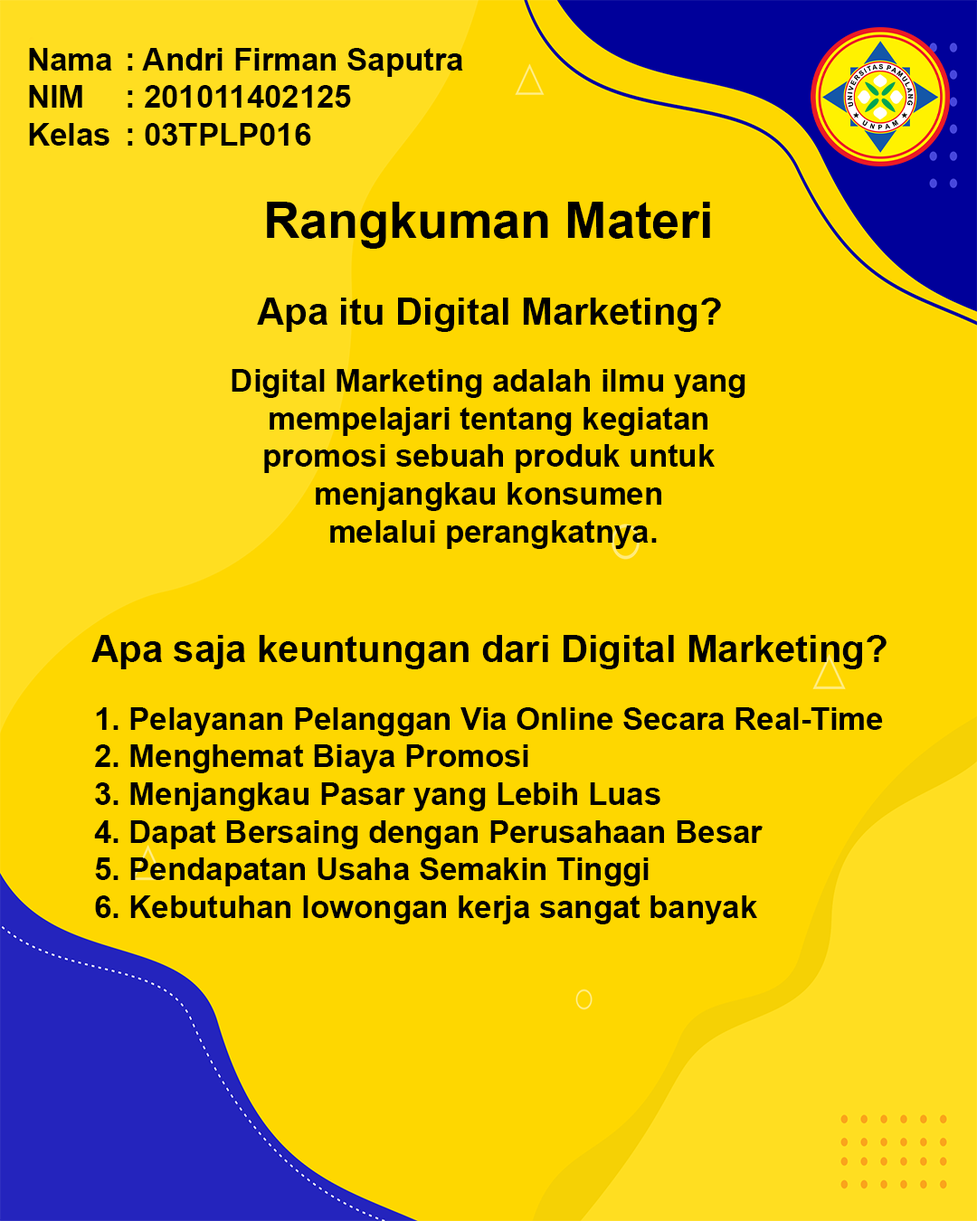
<style>
.page{position:relative;width:977px;height:1221px;background:#fed700}
.page>*{position:absolute;margin:0}
.t1{font:31.4px "Arial-BoldMT";color:#000000}
.t2{font:50.2px "Arial-BoldMT";color:#000000}
.t3{font:37.7px "Arial-BoldMT";color:#000000}
</style>
<div class="page">
<p class="t1" style="left:29px;top:48px;width:434px;height:98px">Nama : Andri Firman Saputra<br>NIM  : 201011402125<br>Kelas : 03TPLP016</p>
<p class="t2" style="left:267px;top:202px;width:443px;height:47px">Rangkuman Materi</p>
<p class="t3" style="left:257px;top:298px;width:464px;height:34px">Apa itu Digital Marketing?</p>
<p class="t1" style="left:232px;top:369px;width:513px;height:180px;text-align:center">Digital Marketing adalah ilmu yang <br>mempelajari tentang kegiatan <br>promosi sebuah produk untuk <br>menjangkau konsumen <br>melalui perangkatnya.</p>
<p class="t3" style="left:91px;top:635px;width:795px;height:34px">Apa saja keuntungan dari Digital Marketing?</p>
<p class="t1" style="left:94px;top:707px;width:789px;height:217px">1. Pelayanan Pelanggan Via Online Secara Real-Time<br>2. Menghemat Biaya Promosi<br>3. Menjangkau Pasar yang Lebih Luas<br>4. Dapat Bersaing dengan Perusahaan Besar<br>5. Pendapatan Usaha Semakin Tinggi<br>6. Kebutuhan lowongan kerja sangat banyak</p>
</div>
